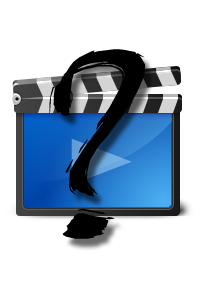
<style>
.page{position:relative;width:200px;height:288px;background:#ffffff}
.page>*{position:absolute;margin:0}
.t1{font:240px "RuachLetPlain";color:#000000}
</style>
<div class="page">
<p class="t1" style="left:49px;top:49px;width:96px;height:190px">?</p>
</div>
